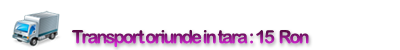
<style>
.page{position:relative;width:400px;height:50px;background:#ffffff}
.page>*{position:absolute;margin:0}
.t1{font:18px "ArialRoundedMTBold";letter-spacing:-0.1em}
</style>
<div class="page">
<p class="t1" style="left:72px;top:29px;width:237px;height:18px">Transport oriunde in tara : 15  Ron</p>
</div>
